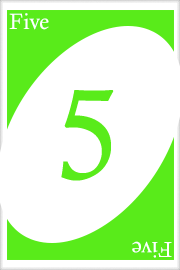
<style>
.page{position:relative;width:180px;height:270px;background:#ffffff}
.page>*{position:absolute;margin:0}
.t1{font:22px "CalistoMT";color:#ffffff}
.t2{font:21.7px "CalistoMT";color:#ffffff}
</style>
<div class="page">
<p class="t1" style="left:9px;top:13px;width:40px;height:17px">Five</p>
<p class="t2" style="left:132px;top:241px;width:40px;height:17px;rotate:180deg">Five</p>
</div>
